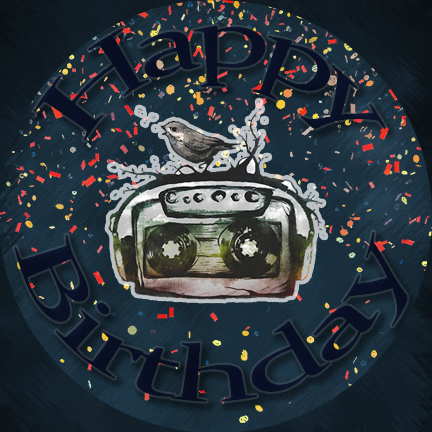
<style>
.page{position:relative;width:432px;height:432px}
.page>*{position:absolute;margin:0}
.t1{font:87.7px "Constantia";letter-spacing:-0.06em;color:#0c0c36}
.t2{font:79.9px "Constantia";letter-spacing:-0.06em;color:#0b0b36}
</style>
<div class="page">
<p class="t1" style="left:33px;top:25px;width:353px;height:116px">Happy</p>
<p class="t2" style="left:14px;top:231px;width:394px;height:171px;text-align:center">Birthday</p>
</div>
